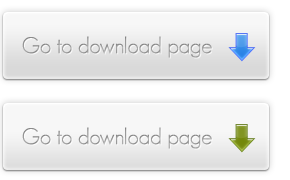
<style>
.page{position:relative;width:290px;height:180px}
.page>*{position:absolute;margin:0}
.t1{font:22.2px "GeosansLight";color:#9a9a9a}
</style>
<div class="page">
<p class="t1" style="left:22px;top:36px;width:190px;height:22px">Go to download page</p>
<p class="t1" style="left:22px;top:127px;width:190px;height:22px">Go to download page</p>
</div>
